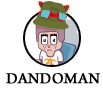
<style>
.page{position:relative;width:103px;height:89px;background:#ffffff}
.page>*{position:absolute;margin:0}
.t1{font:16px "ArnoPro-Regular";letter-spacing:-0.01em;color:#000000;text-transform:uppercase;font-weight:bold}
</style>
<div class="page">
<p class="t1" style="left:6px;top:73px;width:94px;height:11px">dandoman</p>
</div>
